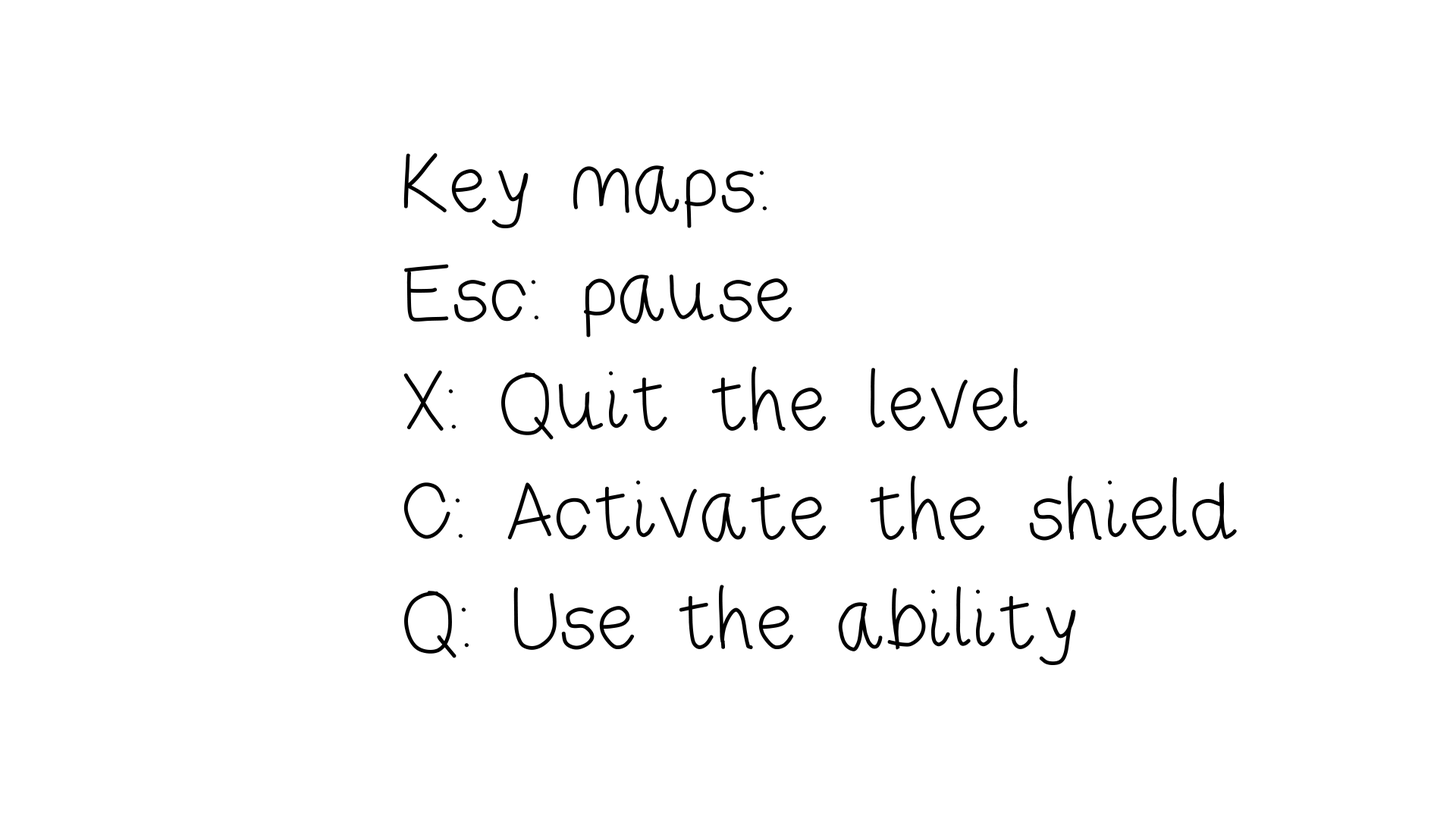
<style>
.page{position:relative;width:1456px;height:819px;background:#ffffff}
.page>*{position:absolute;margin:0}
.t1{font:91px "RiseStarHand";color:#000000}
</style>
<div class="page">
<p class="t1" style="left:403px;top:153px;width:834px;height:512px">Key maps:<br>Esc: pause<br>X: Quit the level<br>C: Activate the shield<br>Q: Use the ability</p>
</div>
